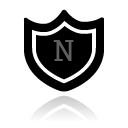
<style>
.page{position:relative;width:128px;height:128px;background:#ffffff}
.page>*{position:absolute;margin:0}
.t1{font:36px "Courier";color:#5f5f5f}
</style>
<div class="page">
<p class="t1" style="left:53px;top:40px;width:21px;height:21px">N</p>
</div>
